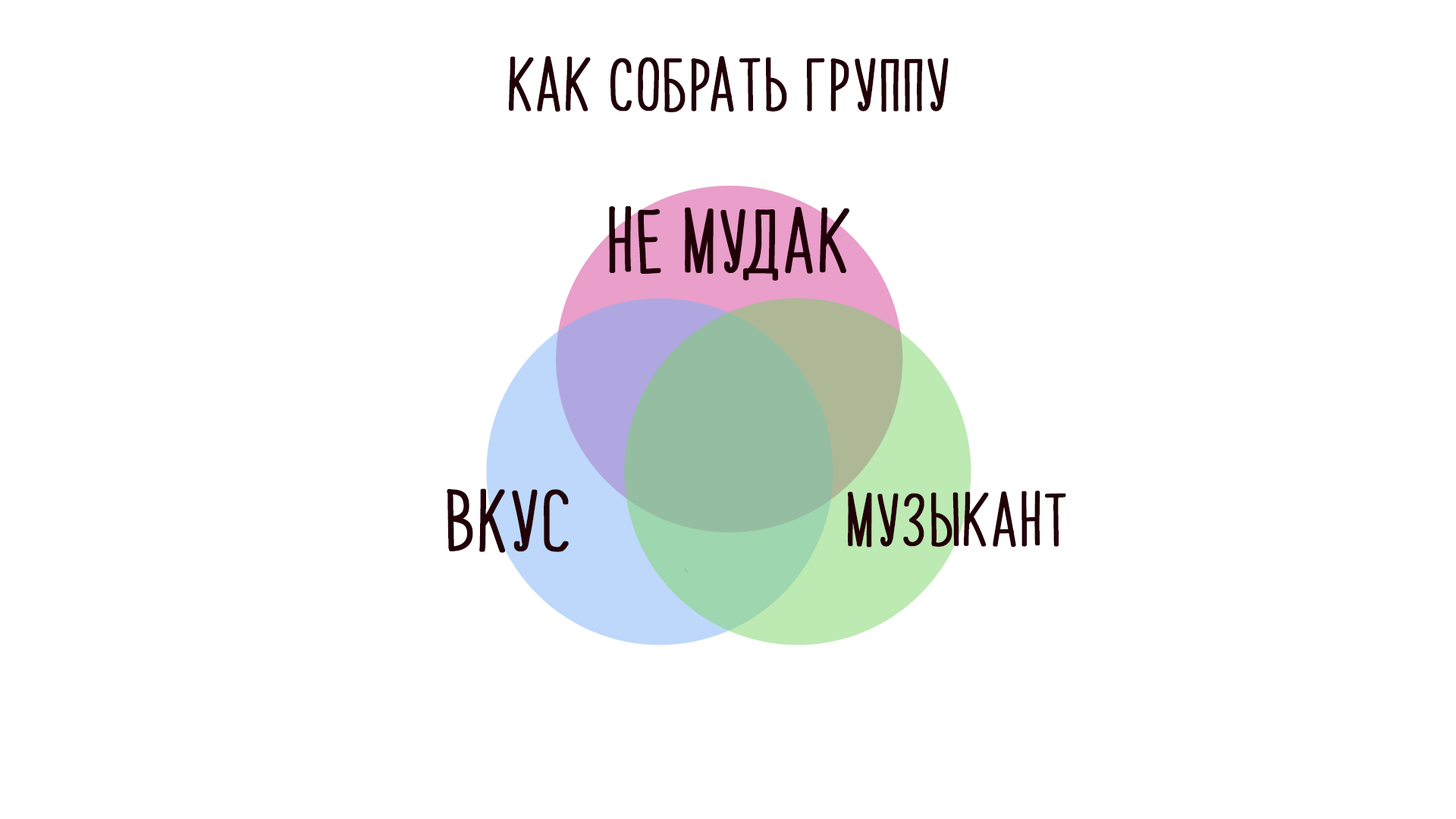
<style>
.page{position:relative;width:1456px;height:819px;background:#ffffff}
.page>*{position:absolute;margin:0}
.t1{font:45.5px "PapayaSunrise";color:#210008;font-weight:bold}
.t2{font:54.6px "PapayaSunrise";color:#210008;font-weight:bold}
.t3{font:53.1px "PapayaSunrise";color:#210008;font-weight:bold}
</style>
<div class="page">
<p class="t1" style="left:509px;top:56px;width:440px;height:56px">как собрать группу</p>
<p class="t2" style="left:609px;top:206px;width:240px;height:75px">не мудак</p>
<p class="t3" style="left:447px;top:488px;width:122px;height:65px">ВКУС</p>
<p class="t1" style="left:848px;top:491px;width:218px;height:57px">музыкант</p>
</div>
